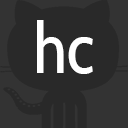
<style>
.page{position:relative;width:128px;height:128px;background:#292929}
.page>*{position:absolute;margin:0}
.t1{font:71.1px "CabinCondensed";color:#ffffff}
</style>
<div class="page">
<p class="t1" style="left:37px;top:20px;width:56px;height:54px">hc</p>
</div>
